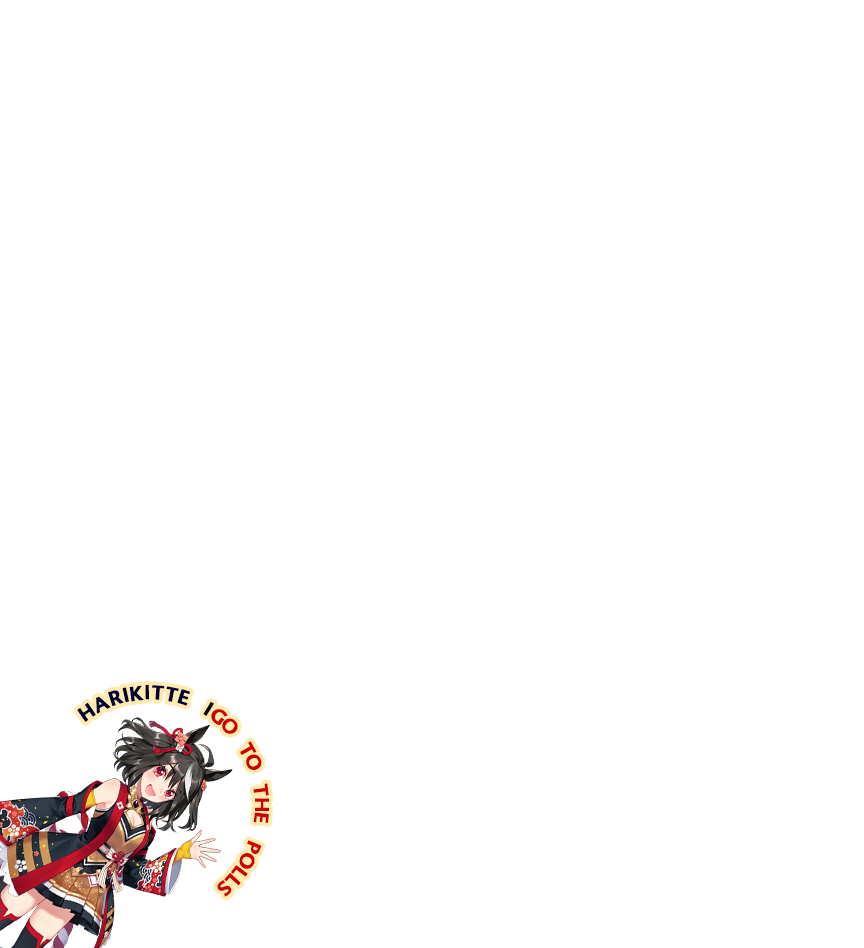
<style>
.page{position:relative;width:864px;height:948px;background:#ffffff}
.page>*{position:absolute;margin:0}
.t1{font:11.6px "Gibbs-Bold";letter-spacing:-0.05em;color:#cc0000;text-transform:uppercase;font-weight:bold}
.t2{font:11.6px "Gibbs-Bold";color:#000033;text-transform:uppercase;font-weight:bold}
.t3{font:11.6px "Gibbs-Bold";color:#000000;text-transform:uppercase;font-weight:bold}
</style>
<div class="page">
<p class="t1" style="left:77px;top:685px;width:192px;height:212px;rotate:52deg"><span class="t2">Harikitte   </span><span class="t3">I</span>Go   to   the    polls</p>
</div>
